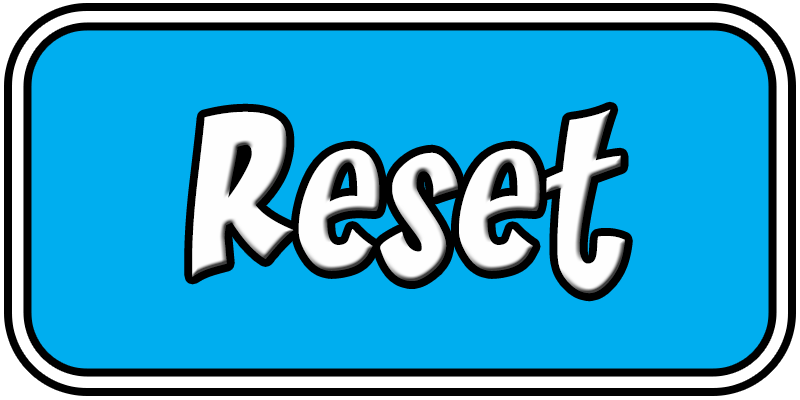
<style>
.page{position:relative;width:800px;height:400px;background:#00aeef}
.page>*{position:absolute;margin:0}
.t1{font:200px "Yikes";color:#fefefe}
</style>
<div class="page">
<p class="t1" style="left:192px;top:109px;width:433px;height:185px">Reset</p>
</div>
